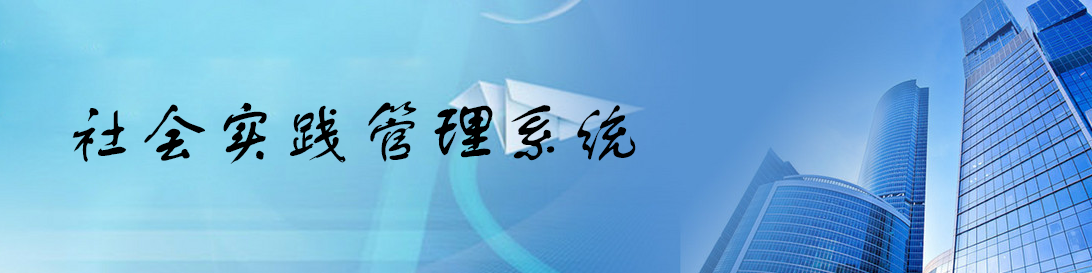
<style>
.page{position:relative;width:1092px;height:273px}
.page>*{position:absolute;margin:0}
.t1{font:72px "FZSTK--GBK1-0";color:#000000}
</style>
<div class="page">
<p class="t1" style="left:72px;top:101px;width:564px;height:63px">社会实践管理系统</p>
</div>
